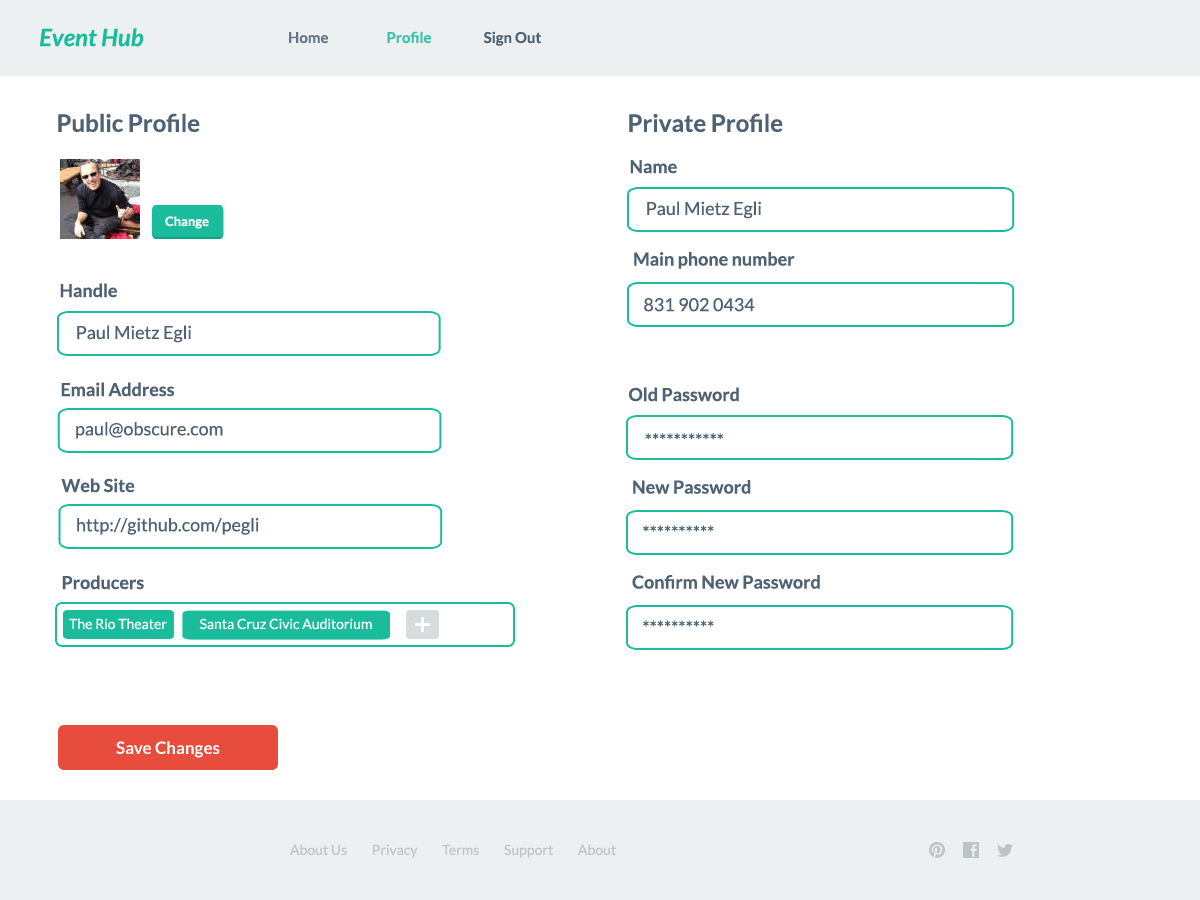
<style>
.page{position:relative;width:1200px;height:900px;background:#ffffff}
.page>*{position:absolute;margin:0}
.t1{font:24px "Lato-BoldItalic";color:#1abc9c}
.t2{font:15px "Lato-Bold";color:#34495e}
.t3{font:15px "Lato-Bold";color:#4f6274}
.t4{font:15px "Lato-Bold";color:#1abc9c}
.t5{font:24px "Lato-Bold";color:#4f6274}
.t6{font:18px "Lato-Bold";color:#4f6274}
.t7{font:18px "Lato-Regular";color:#4f6274}
.t8{font:13px "Lato-Bold";color:#ffffff}
.t9{font:14px "Lato-Regular";color:#ffffff}
.t10{font:17px "Lato-Bold";color:#ffffff}
.t11{font:14px "Lato-Regular";color:#c0c5ca}
</style>
<div class="page">
<p class="t1" style="left:40px;top:28px;width:104px;height:19px">Event Hub</p>
<p class="t2" style="left:289px;top:31px;width:252px;height:15px;opacity:0.85"><span class="t3">Home                    </span><span class="t4">Profile                  </span>Sign Out</p>
<p class="t5" style="left:58px;top:113px;width:142px;height:19px">Public Profile</p>
<p class="t5" style="left:629px;top:113px;width:154px;height:19px">Private Profile</p>
<p class="t6" style="left:630px;top:160px;width:47px;height:14px">Name</p>
<p class="t7" style="left:647px;top:201px;width:114px;height:18px">Paul Mietz Egli</p>
<p class="t8" style="left:165px;top:216px;width:44px;height:13px">Change</p>
<p class="t6" style="left:634px;top:252px;width:161px;height:17px">Main phone number</p>
<p class="t6" style="left:60px;top:283px;width:57px;height:15px">Handle</p>
<p class="t7" style="left:644px;top:298px;width:111px;height:14px">831 902 0434</p>
<p class="t7" style="left:77px;top:325px;width:114px;height:18px">Paul Mietz Egli</p>
<p class="t6" style="left:61px;top:382px;width:113px;height:15px">Email Address</p>
<p class="t6" style="left:629px;top:387px;width:110px;height:15px">Old Password</p>
<p class="t7" style="left:76px;top:422px;width:147px;height:17px">paul@obscure.com</p>
<p class="t7" style="left:645px;top:433px;width:79px;height:7px">***********</p>
<p class="t6" style="left:61px;top:478px;width:74px;height:15px">Web Site</p>
<p class="t6" style="left:633px;top:480px;width:118px;height:14px">New Password</p>
<p class="t7" style="left:77px;top:518px;width:182px;height:17px">http://github.com/pegli</p>
<p class="t7" style="left:643px;top:525px;width:71px;height:7px">**********</p>
<p class="t6" style="left:62px;top:575px;width:82px;height:15px">Producers</p>
<p class="t6" style="left:632px;top:575px;width:188px;height:14px">Confirm New Password</p>
<p class="t9" style="left:69px;top:618px;width:98px;height:12px">The Rio Theater</p>
<p class="t9" style="left:199px;top:618px;width:173px;height:12px">Santa Cruz Civic Auditorium</p>
<p class="t7" style="left:643px;top:620px;width:71px;height:7px">**********</p>
<p class="t10" style="left:116px;top:741px;width:104px;height:17px">Save Changes</p>
<p class="t11" style="left:290px;top:844px;width:326px;height:14px">About Us         Privacy         Terms         Support         About</p>
</div>
